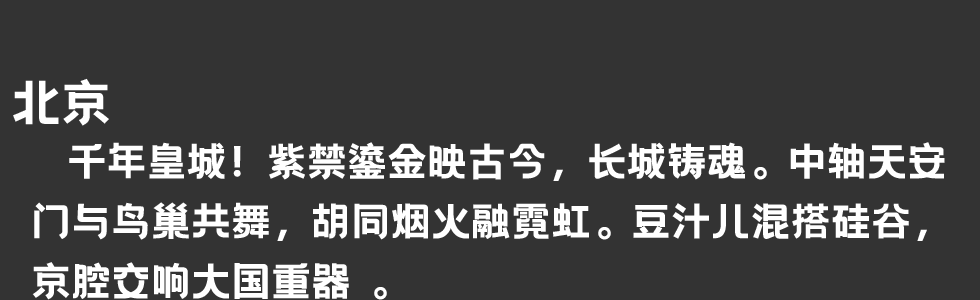
<style>
.page{position:relative;width:980px;height:300px;background:#333333}
.page>*{position:absolute;margin:0}
.t1{font:50px "HelloFont-WenYiHei";color:#ffffff}
.t2{font:40px/60px "HelloFont-WenYiHei";color:#ffffff}
</style>
<div class="page">
<p class="t1" style="left:13px;top:78px;width:96px;height:48px">北京</p>
<p class="t2" style="left:32px;top:142px;width:913px;height:158px">千年皇城！紫禁鎏金映古今，长城铸魂。中轴天安<br>门与鸟巢共舞，胡同烟火融霓虹。豆汁儿混搭硅谷，<br>京腔交响大国重器 。</p>
</div>
